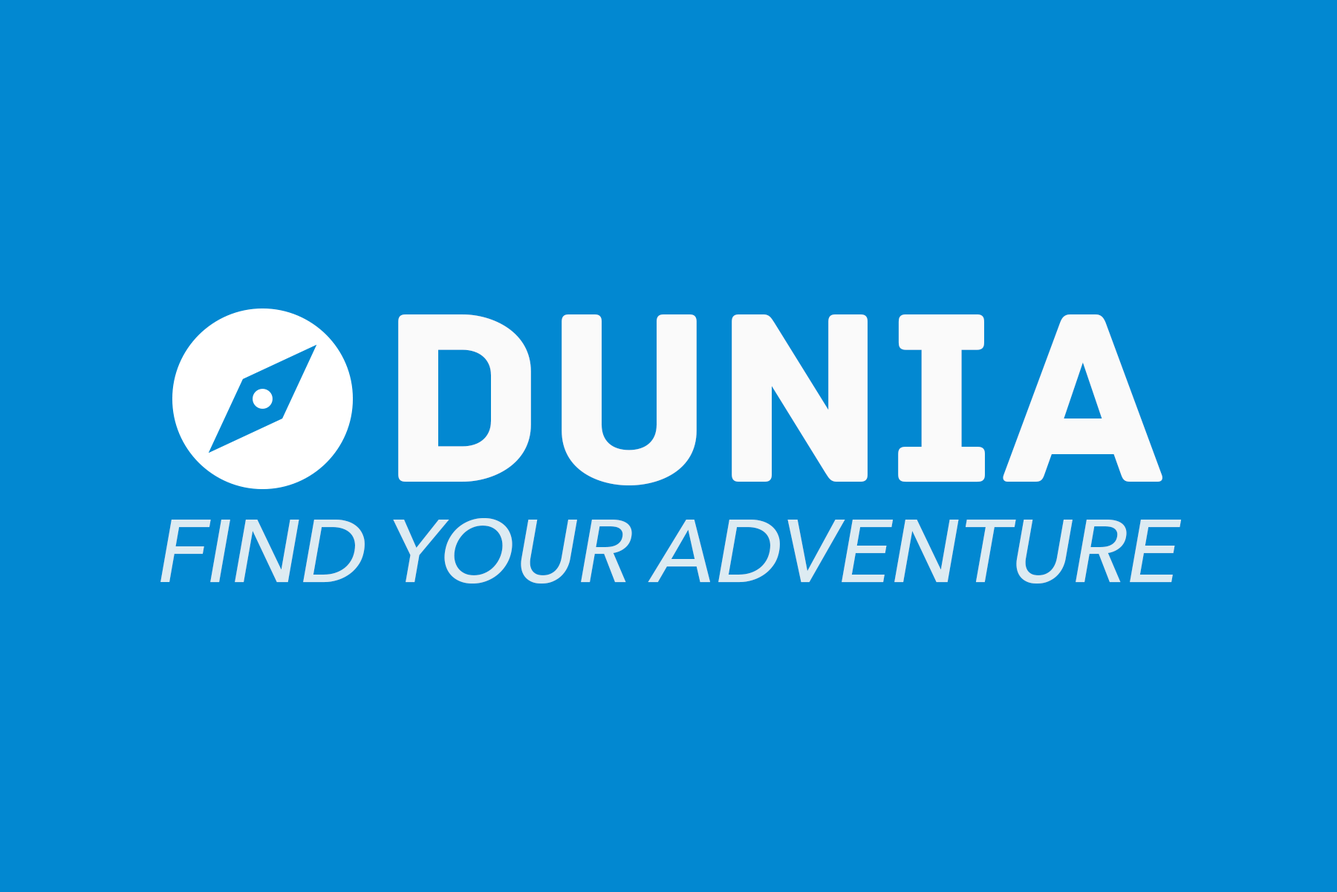
<style>
.page{position:relative;width:1337px;height:892px;background:#0288d1}
.page>*{position:absolute;margin:0}
.t1{font:254.4px "Archive";color:#fafafa}
.t2{font:88.5px "AvenirNext-Medium";color:#ddebf2;font-style:italic}
</style>
<div class="page">
<p class="t1" style="left:398px;top:314px;width:765px;height:171px">DUNIA</p>
<p class="t2" style="left:160px;top:518px;width:1022px;height:65px">FIND YOUR ADVENTURE</p>
</div>
